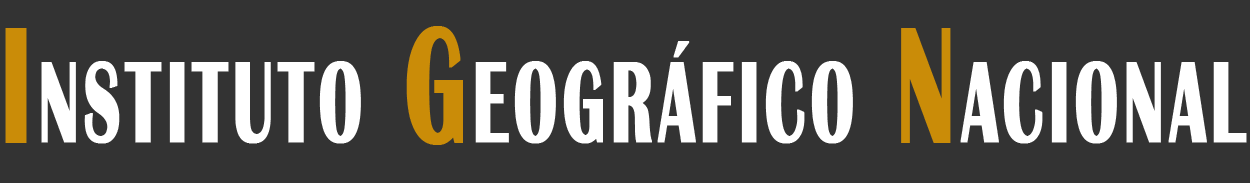
<style>
.page{position:relative;width:1250px;height:183px;background:#333333}
.page>*{position:absolute;margin:0}
.t1{font:168.9px "BritannicBold";letter-spacing:0.06em;color:#ffffff;font-variant:small-caps;font-weight:bold;scale:0.56 1}
.t2{font:168.9px "BritannicBold";letter-spacing:0.06em;color:#ca8c08;font-variant:small-caps;font-weight:bold;scale:0.56 1}
</style>
<div class="page">
<p class="t1" style="left:5px;top:26px;width:1242px;height:119px"><span class="t2">I</span>nstituto <span class="t2">G</span>eográfico <span class="t2">N</span>acional</p>
</div>
